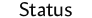
<style>
.page{position:relative;width:92px;height:18px;background:#ffffff}
.page>*{position:absolute;margin:0}
.t1{font:20px "Amira-Roman";color:#000000}
</style>
<div class="page">
<p class="t1" style="left:19px;top:2px;width:53px;height:15px;opacity:0.96">Status</p>
</div>
